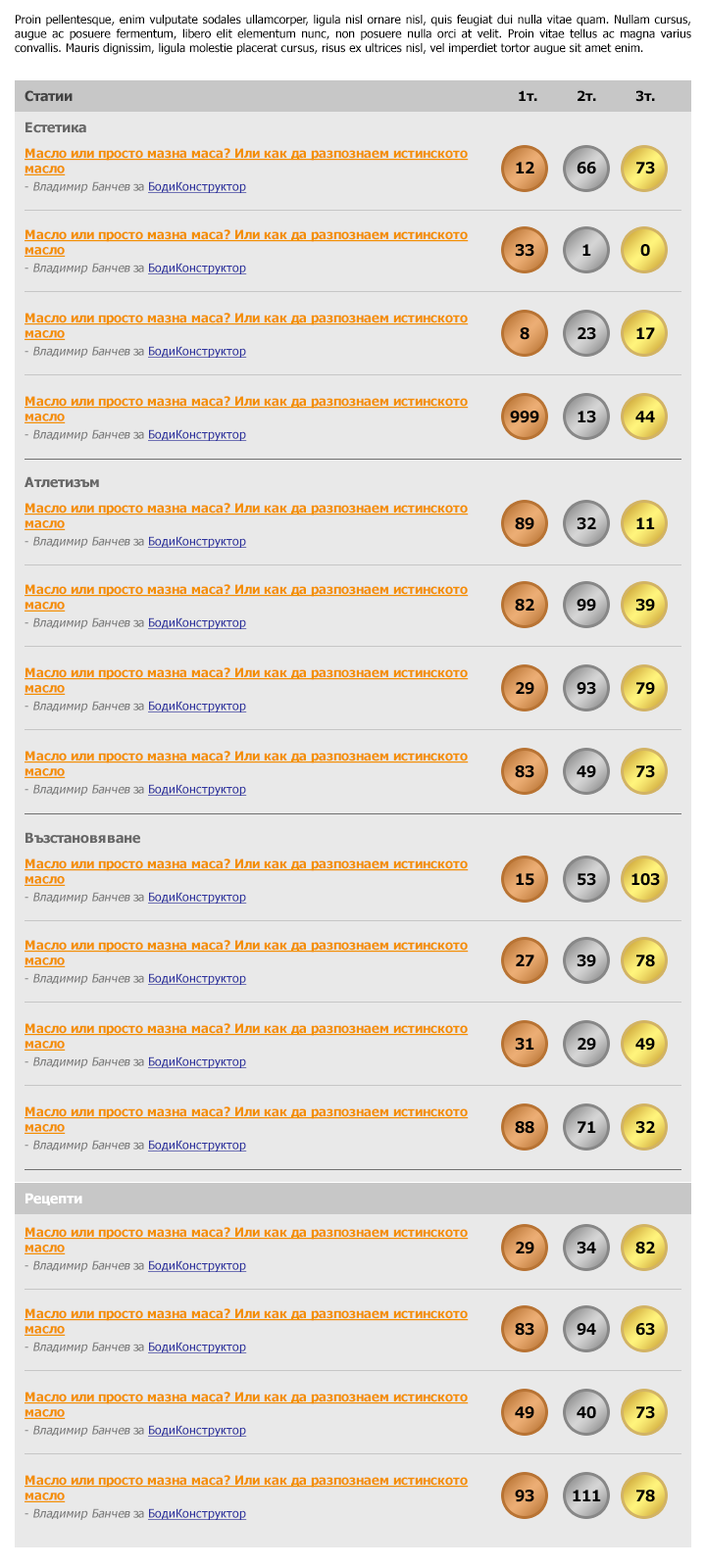
<style>
.page{position:relative;width:706px;height:1568px;background:#e9e9e9}
.page>*{position:absolute;margin:0}
.t1{font:11.8px "Tahoma";color:#000000}
.t2{font:13.7px "Tahoma-Bold";color:#434343}
.t3{font:13.7px "Tahoma-Bold";color:#000000}
.t4{font:13.7px "Tahoma-Bold";color:#676767}
.t5{font:12.7px "Tahoma-Bold";color:#f38f00;text-decoration:underline}
.t6{font:11.8px/17.6px "Tahoma";color:#7c7c7c}
.t7{font:11.8px/17.6px "Tahoma";color:#7c7c7c;font-style:italic}
.t8{font:11.8px/17.6px "Tahoma";color:#2c319e;text-decoration:underline}
.t9{font:15.7px "Tahoma-Bold";color:#000000}
.t10{font:13.7px "Tahoma-Bold";color:#ffffff}
</style>
<div class="page">
<p class="t1" style="left:15px;top:15px;width:676px;height:40px;text-align:justify">Proin pellentesque, enim vulputate sodales ullamcorper, ligula nisl ornare nisl, quis feugiat dui nulla vitae quam. Nullam cursus, augue ac posuere fermentum, libero elit elementum nunc, non posuere nulla orci at velit. Proin vitae tellus ac magna varius convallis. Mauris dignissim, ligula molestie placerat cursus, risus ex ultrices nisl, vel imperdiet tortor augue sit amet enim.</p>
<p class="t2" style="left:24px;top:90px;width:49px;height:12px">Статии</p>
<p class="t3" style="left:518px;top:90px;width:137px;height:12px">1т.          2т.          3т.</p>
<p class="t4" style="left:25px;top:122px;width:61px;height:11px">Естетика</p>
<p class="t5" style="left:24px;top:148px;width:444px;height:45px">Масло или просто мазна маса? Или как да разпознаем истинското масло<br><span class="t6">- </span><span class="t7">Владимир Банчев</span><span class="t6"> за </span><span class="t8">БодиКонструктор</span></p>
<p class="t9" style="left:515px;top:162px;width:19px;height:11px">12</p>
<p class="t9" style="left:576px;top:162px;width:20px;height:12px">66</p>
<p class="t9" style="left:636px;top:162px;width:19px;height:12px">73</p>
<p class="t5" style="left:24px;top:229px;width:444px;height:45px">Масло или просто мазна маса? Или как да разпознаем истинското масло<br><span class="t6">- </span><span class="t7">Владимир Банчев</span><span class="t6"> за </span><span class="t8">БодиКонструктор</span></p>
<p class="t9" style="left:514px;top:244px;width:20px;height:13px">33</p>
<p class="t9" style="left:582px;top:244px;width:9px;height:12px">1</p>
<p class="t9" style="left:640px;top:244px;width:10px;height:13px">0</p>
<p class="t5" style="left:24px;top:313px;width:444px;height:45px">Масло или просто мазна маса? Или как да разпознаем истинското масло<br><span class="t6">- </span><span class="t7">Владимир Банчев</span><span class="t6"> за </span><span class="t8">БодиКонструктор</span></p>
<p class="t9" style="left:519px;top:327px;width:10px;height:13px">8</p>
<p class="t9" style="left:577px;top:327px;width:19px;height:13px">23</p>
<p class="t9" style="left:636px;top:327px;width:19px;height:12px">17</p>
<p class="t5" style="left:24px;top:396px;width:444px;height:45px">Масло или просто мазна маса? Или как да разпознаем истинското масло<br><span class="t6">- </span><span class="t7">Владимир Банчев</span><span class="t6"> за </span><span class="t8">БодиКонструктор</span></p>
<p class="t9" style="left:510px;top:411px;width:29px;height:12px">999</p>
<p class="t9" style="left:577px;top:411px;width:19px;height:12px">13</p>
<p class="t9" style="left:635px;top:411px;width:20px;height:11px">44</p>
<p class="t4" style="left:24px;top:476px;width:75px;height:12px">Атлетизъм</p>
<p class="t5" style="left:24px;top:503px;width:444px;height:45px">Масло или просто мазна маса? Или как да разпознаем истинското масло<br><span class="t6">- </span><span class="t7">Владимир Банчев</span><span class="t6"> за </span><span class="t8">БодиКонструктор</span></p>
<p class="t9" style="left:514px;top:517px;width:20px;height:13px">89</p>
<p class="t9" style="left:576px;top:517px;width:20px;height:13px">32</p>
<p class="t9" style="left:636px;top:517px;width:19px;height:12px">11</p>
<p class="t5" style="left:24px;top:584px;width:444px;height:45px">Масло или просто мазна маса? Или как да разпознаем истинското масло<br><span class="t6">- </span><span class="t7">Владимир Банчев</span><span class="t6"> за </span><span class="t8">БодиКонструктор</span></p>
<p class="t9" style="left:514px;top:599px;width:20px;height:13px">82</p>
<p class="t9" style="left:576px;top:599px;width:20px;height:13px">99</p>
<p class="t9" style="left:635px;top:599px;width:20px;height:13px">39</p>
<p class="t5" style="left:24px;top:667px;width:444px;height:45px">Масло или просто мазна маса? Или как да разпознаем истинското масло<br><span class="t6">- </span><span class="t7">Владимир Банчев</span><span class="t6"> за </span><span class="t8">БодиКонструктор</span></p>
<p class="t9" style="left:515px;top:682px;width:19px;height:13px">29</p>
<p class="t9" style="left:576px;top:682px;width:20px;height:13px">93</p>
<p class="t9" style="left:636px;top:682px;width:19px;height:13px">79</p>
<p class="t5" style="left:24px;top:751px;width:444px;height:45px">Масло или просто мазна маса? Или как да разпознаем истинското масло<br><span class="t6">- </span><span class="t7">Владимир Банчев</span><span class="t6"> за </span><span class="t8">БодиКонструктор</span></p>
<p class="t9" style="left:514px;top:765px;width:20px;height:13px">83</p>
<p class="t9" style="left:576px;top:765px;width:20px;height:13px">49</p>
<p class="t9" style="left:636px;top:765px;width:19px;height:13px">73</p>
<p class="t4" style="left:25px;top:832px;width:115px;height:12px">Възстановяване</p>
<p class="t5" style="left:24px;top:858px;width:444px;height:46px">Масло или просто мазна маса? Или как да разпознаем истинското масло<br><span class="t6">- </span><span class="t7">Владимир Банчев</span><span class="t6"> за </span><span class="t8">БодиКонструктор</span></p>
<p class="t9" style="left:515px;top:873px;width:19px;height:13px">15</p>
<p class="t9" style="left:577px;top:873px;width:19px;height:13px">53</p>
<p class="t9" style="left:631px;top:873px;width:29px;height:13px">103</p>
<p class="t5" style="left:24px;top:940px;width:444px;height:45px">Масло или просто мазна маса? Или как да разпознаем истинското масло<br><span class="t6">- </span><span class="t7">Владимир Банчев</span><span class="t6"> за </span><span class="t8">БодиКонструктор</span></p>
<p class="t9" style="left:515px;top:955px;width:19px;height:11px">27</p>
<p class="t9" style="left:576px;top:955px;width:20px;height:12px">39</p>
<p class="t9" style="left:636px;top:955px;width:19px;height:12px">78</p>
<p class="t5" style="left:24px;top:1023px;width:444px;height:45px">Масло или просто мазна маса? Или как да разпознаем истинското масло<br><span class="t6">- </span><span class="t7">Владимир Банчев</span><span class="t6"> за </span><span class="t8">БодиКонструктор</span></p>
<p class="t9" style="left:514px;top:1038px;width:20px;height:13px">31</p>
<p class="t9" style="left:577px;top:1038px;width:19px;height:13px">29</p>
<p class="t9" style="left:635px;top:1038px;width:20px;height:13px">49</p>
<p class="t5" style="left:24px;top:1106px;width:444px;height:46px">Масло или просто мазна маса? Или как да разпознаем истинското масло<br><span class="t6">- </span><span class="t7">Владимир Банчев</span><span class="t6"> за </span><span class="t8">БодиКонструктор</span></p>
<p class="t9" style="left:514px;top:1121px;width:20px;height:13px">88</p>
<p class="t9" style="left:577px;top:1121px;width:19px;height:12px">71</p>
<p class="t9" style="left:635px;top:1121px;width:20px;height:13px">32</p>
<p class="t10" style="left:25px;top:1193px;width:57px;height:12px">Рецепти</p>
<p class="t5" style="left:24px;top:1227px;width:444px;height:45px">Масло или просто мазна маса? Или как да разпознаем истинското масло<br><span class="t6">- </span><span class="t7">Владимир Банчев</span><span class="t6"> за </span><span class="t8">БодиКонструктор</span></p>
<p class="t9" style="left:515px;top:1242px;width:19px;height:12px">29</p>
<p class="t9" style="left:576px;top:1242px;width:20px;height:12px">34</p>
<p class="t9" style="left:635px;top:1242px;width:20px;height:12px">82</p>
<p class="t5" style="left:24px;top:1308px;width:444px;height:45px">Масло или просто мазна маса? Или как да разпознаем истинското масло<br><span class="t6">- </span><span class="t7">Владимир Банчев</span><span class="t6"> за </span><span class="t8">БодиКонструктор</span></p>
<p class="t9" style="left:514px;top:1323px;width:20px;height:13px">83</p>
<p class="t9" style="left:576px;top:1323px;width:20px;height:13px">94</p>
<p class="t9" style="left:635px;top:1323px;width:20px;height:13px">63</p>
<p class="t5" style="left:24px;top:1392px;width:444px;height:45px">Масло или просто мазна маса? Или как да разпознаем истинското масло<br><span class="t6">- </span><span class="t7">Владимир Банчев</span><span class="t6"> за </span><span class="t8">БодиКонструктор</span></p>
<p class="t9" style="left:514px;top:1406px;width:20px;height:13px">49</p>
<p class="t9" style="left:576px;top:1406px;width:20px;height:13px">40</p>
<p class="t9" style="left:636px;top:1406px;width:19px;height:13px">73</p>
<p class="t5" style="left:24px;top:1475px;width:444px;height:45px">Масло или просто мазна маса? Или как да разпознаем истинското масло<br><span class="t6">- </span><span class="t7">Владимир Банчев</span><span class="t6"> за </span><span class="t8">БодиКонструктор</span></p>
<p class="t9" style="left:514px;top:1490px;width:20px;height:12px">93</p>
<p class="t9" style="left:572px;top:1490px;width:29px;height:11px">111</p>
<p class="t9" style="left:636px;top:1490px;width:19px;height:12px">78</p>
</div>
